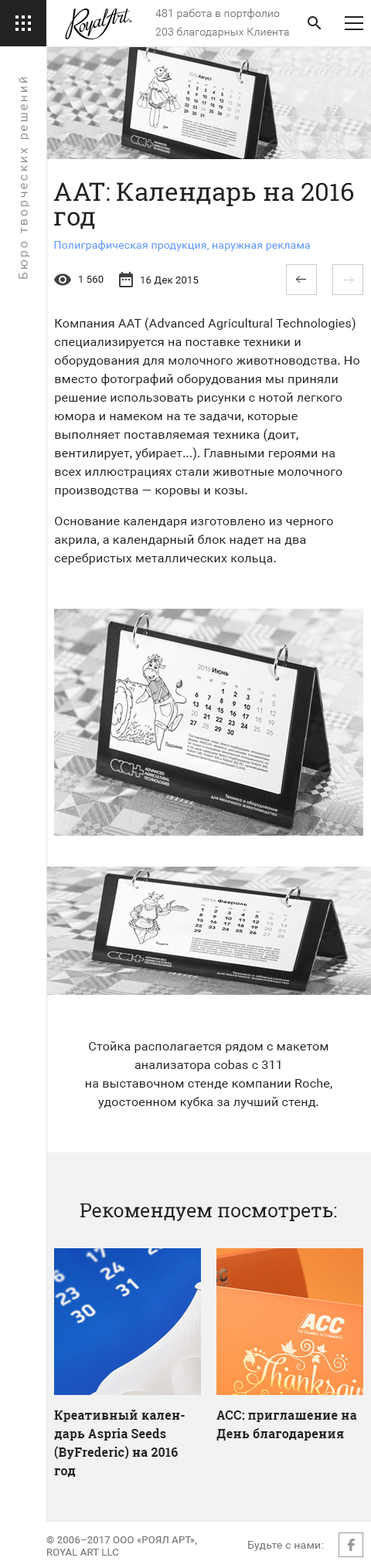
<style>
.page{position:relative;width:371px;height:1568px;background:#ffffff}
.page>*{position:absolute;margin:0}
.t1{font:10.8px/18.5px "Roboto-Light";color:#757575;scale:1.03 1}
.t2{font:11.6px "Roboto-Light";letter-spacing:0.2em;color:#757575;scale:1.05 1}
.t3{font:24.7px/24.7px "RobotoSlab-Regular";color:#222222;scale:1.03 1}
.t4{font:10.8px "Roboto-Regular";color:#5e98fd;scale:1.03 1}
.t5{font:10px "Roboto-Regular";color:#222222;scale:1.03 1}
.t6{font:12.4px/18.5px "Roboto-Regular";color:#222222}
.t7{font:12.4px/18.5px "Roboto-Regular";color:#222222;scale:1.03 1}
.t8{font:18.5px "RobotoSlab-Regular";color:#222222;scale:1.03 1}
.t9{font:12.4px/18.5px "RobotoSlab-Bold";color:#222222;scale:1.03 1}
.t10{font:10px/12.4px "Roboto-Regular";color:#757575;scale:1.03 1}
.t11{font:10.8px "Roboto-Regular";color:#757575;scale:1.03 1}
</style>
<div class="page">
<p class="t1" style="left:155px;top:8px;width:134px;height:30px">481 работа в портфолио <br>203 благодарных Клиента</p>
<p class="t2" style="left:19px;top:77px;width:11px;height:202px;rotate:-90deg">Бюро творческих решений</p>
<p class="t3" style="left:53px;top:182px;width:301px;height:47px">AAT: Календарь на 2016 <br>год</p>
<p class="t4" style="left:54px;top:240px;width:256px;height:11px">Полиграфическая продукция, наружная реклама</p>
<p class="t5" style="left:79px;top:276px;width:25px;height:7px">1 560</p>
<p class="t5" style="left:141px;top:277px;width:58px;height:8px">16 Дек 2015</p>
<p class="t6" style="left:54px;top:317px;width:305px;height:248px">Компания AAT (Advanced Agricultural Technologies) специализируется на поставке техники и оборудования для молочного животноводства. Но вместо фотографий оборудования мы приняли решение использовать рисунки с нотой легкого юмора и намеком на те задачи, которые выполняет поставляемая техника (доит, вентилирует, убирает...). Главными героями на всех иллюстрациях стали животные молочного производства — коровы и козы.<br>Основание календаря изготовлено из черного акрила, а календарный блок надет на два серебристых металлических кольца.</p>
<p class="t7" style="left:85px;top:1041px;width:247px;height:67px;text-align:center">Стойка располагается рядом с макетом анализатора cobas c 311<br>на выставочном стенде компании Roche, удостоенном кубка за лучший стенд.</p>
<p class="t8" style="left:80px;top:1203px;width:257px;height:18px">Рекомендуем посмотреть:</p>
<p class="t9" style="left:54px;top:1410px;width:131px;height:67px">Креативный календарь Aspria Seeds (ByFrederic) на 2016 год</p>
<p class="t9" style="left:216px;top:1410px;width:141px;height:31px">ACC: приглашение на День благодарения</p>
<p class="t10" style="left:46px;top:1536px;width:151px;height:20px">© 2006–2017 ООО «РОЯЛ АРТ»,<br>ROYAL ART LLC</p>
<p class="t11" style="left:248px;top:1541px;width:76px;height:10px">Будьте с нами:</p>
</div>
